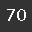
<style>
.page{position:relative;width:32px;height:32px;background:#333333}
.page>*{position:absolute;margin:0}
.t1{font:17.8px "MyriadPro-Regular";color:#ffffff;scale:1.12 1}
</style>
<div class="page">
<p class="t1" style="left:7px;top:9px;width:19px;height:12px">70</p>
</div>
